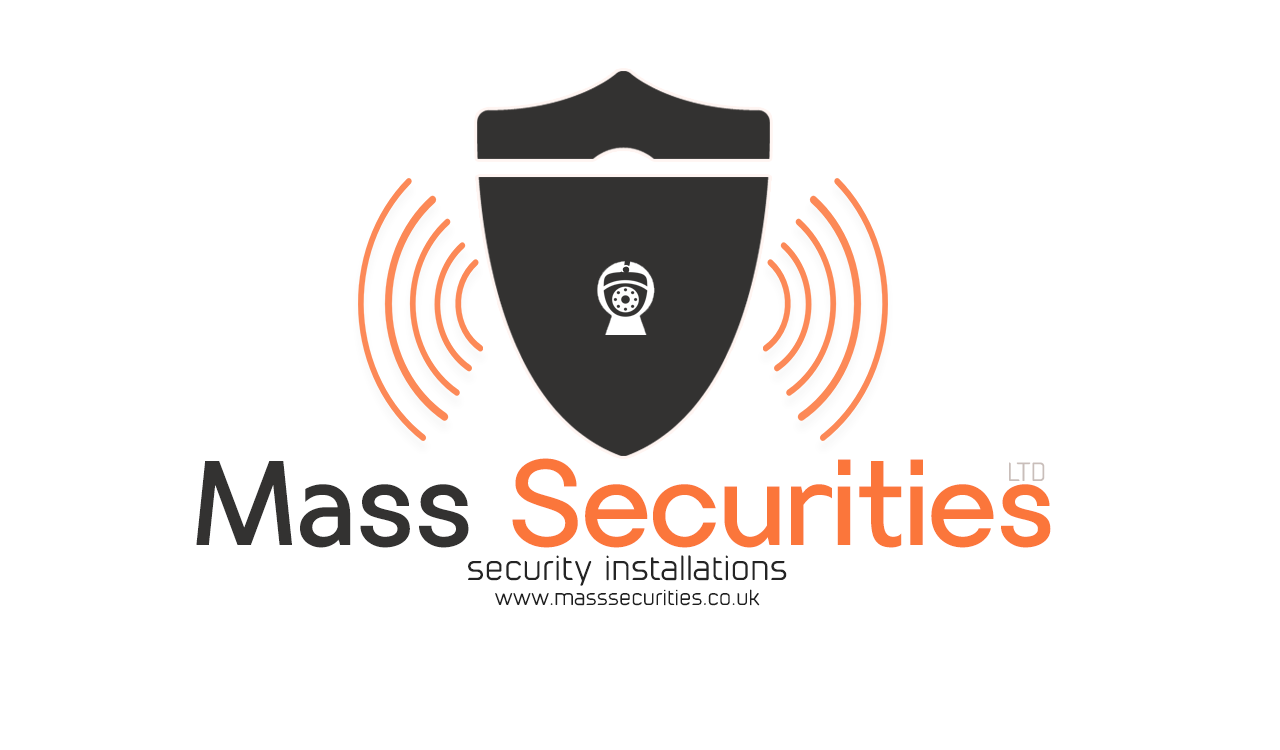
<style>
.page{position:relative;width:1280px;height:750px;background:#ffffff}
.page>*{position:absolute;margin:0}
.t1{font:116.7px "Villeray-Regular";color:#fb763b}
.t2{font:116.7px "Villeray-Regular";color:#333231}
.t3{font:25px "cuyabra-Regular";color:#c9beba}
.t4{font:33.3px "cuyabra-Regular";color:#252424}
.t5{font:20.8px "cuyabra-Regular";color:#1e1e1d}
</style>
<div class="page">
<p class="t1" style="left:196px;top:458px;width:855px;height:90px"><span class="t2">Mass </span>Securities</p>
<p class="t3" style="left:1009px;top:462px;width:36px;height:19px">LTD</p>
<p class="t4" style="left:468px;top:555px;width:319px;height:31px">security installations</p>
<p class="t5" style="left:495px;top:589px;width:265px;height:17px">www.masssecurities.co.uk</p>
</div>
